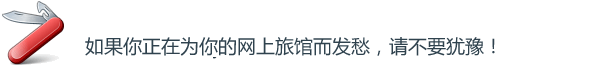
<style>
.page{position:relative;width:613px;height:71px;background:#ffffff}
.page>*{position:absolute;margin:0}
.t1{font:19px "YaHei-Consolas-Hybrid";color:#2f424e}
</style>
<div class="page">
<p class="t1" style="left:85px;top:37px;width:410px;height:19px">如果你正在为你的网上旅馆而发愁，请不要犹豫！</p>
</div>
